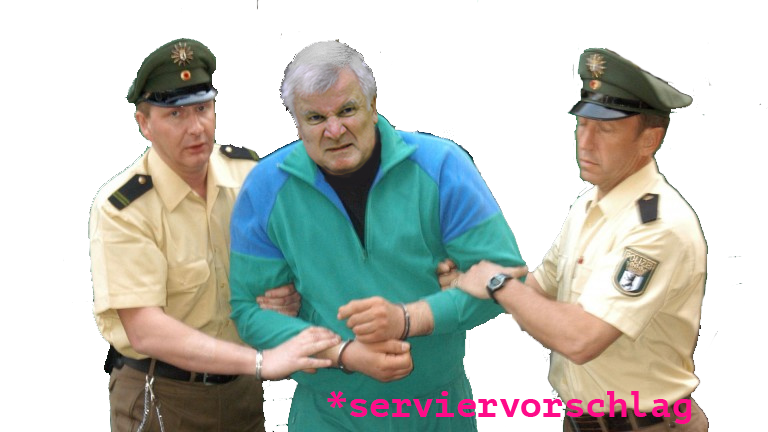
<style>
.page{position:relative;width:768px;height:432px;background:#ffffff}
.page>*{position:absolute;margin:0}
.t1{font:36px "PTMono-Bold";color:#fe0b89}
</style>
<div class="page">
<p class="t1" style="left:327px;top:391px;width:365px;height:33px">*serviervorschlag</p>
</div>
